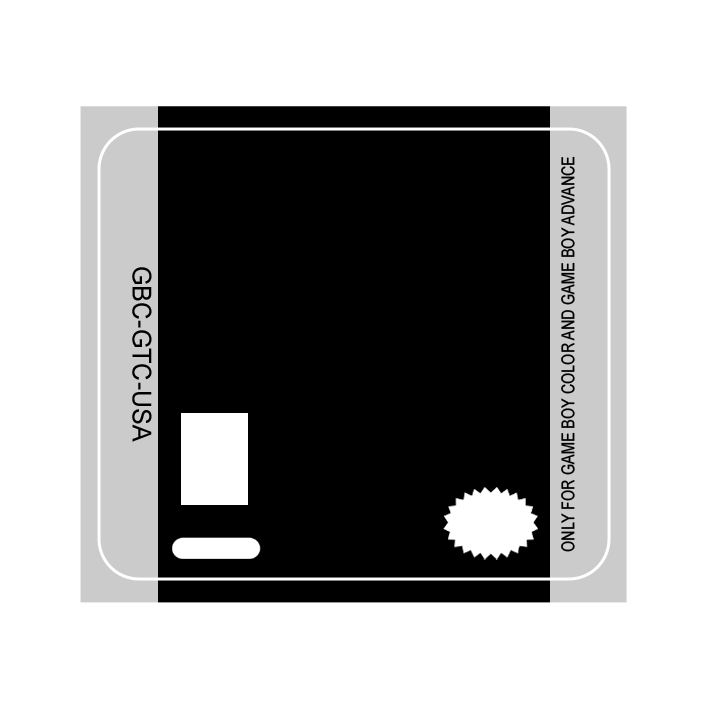
<style>
.page{position:relative;width:708px;height:708px;background:#ffffff}
.page>*{position:absolute;margin:0}
.t1{font:17.7px "ArialMT";color:#000000;scale:0.82 1}
.t2{font:26.2px "ArialMT";color:#000000;scale:0.96 1}
</style>
<div class="page">
<p class="t1" style="left:561px;top:156px;width:14px;height:396px;rotate:-90deg">ONLY FOR GAME BOY COLOR AND GAME BOY ADVANCE</p>
<p class="t2" style="left:132px;top:267px;width:20px;height:175px;rotate:90deg">GBC-GTC-USA</p>
</div>
